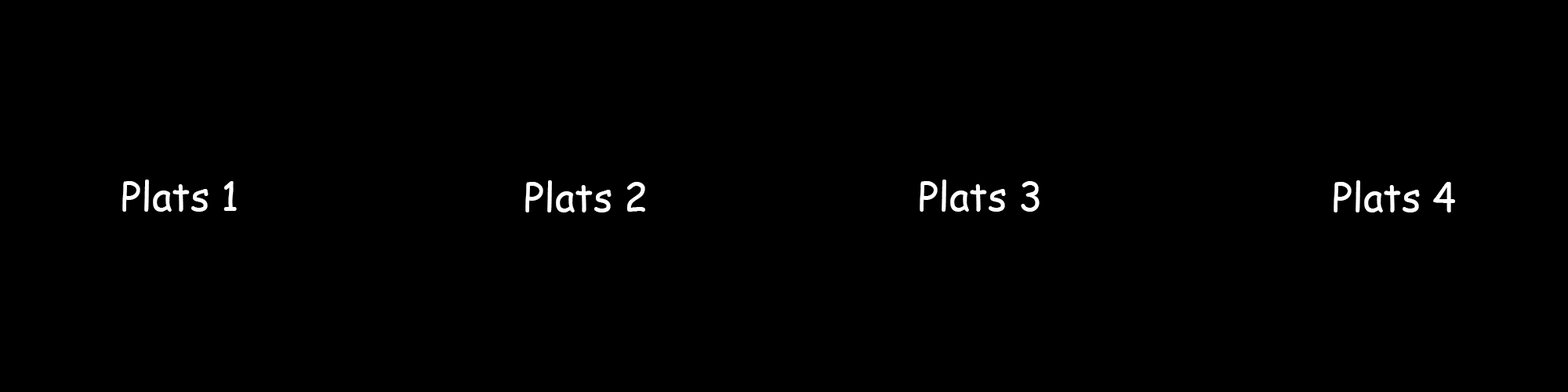
<style>
.page{position:relative;width:1568px;height:392px;background:#000000}
.page>*{position:absolute;margin:0}
.t1{font:9.4px "ComicSansMS";color:#ffffff}
</style>
<div class="page">
<p class="t1" style="left:122px;top:180px;width:115px;height:32px">Plats 1</p>
<p class="t1" style="left:525px;top:180px;width:120px;height:32px">Plats 2</p>
<p class="t1" style="left:920px;top:180px;width:120px;height:32px">Plats 3</p>
<p class="t1" style="left:1334px;top:180px;width:121px;height:32px">Plats 4</p>
</div>
